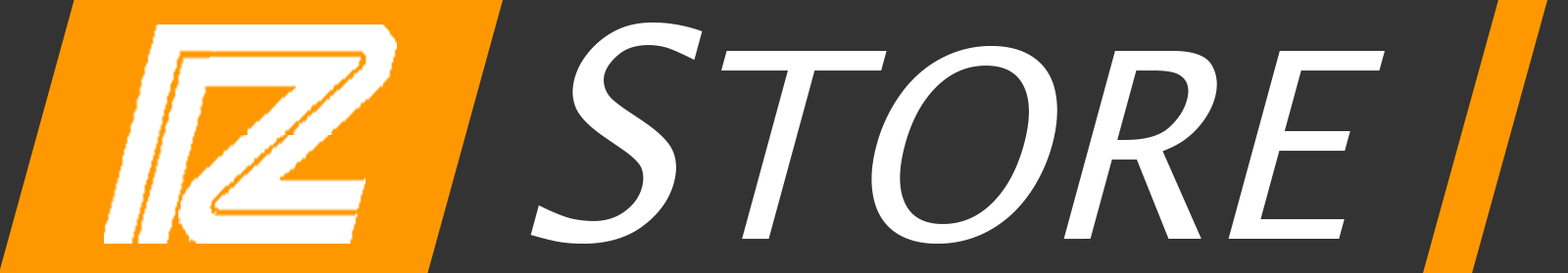
<style>
.page{position:relative;width:1568px;height:273px;background:#333333}
.page>*{position:absolute;margin:0}
.t1{font:269.2px "LucidaSans";color:#ffffff;scale:0.97 1}
.t2{font:303.8px "LucidaSans";color:#ffffff;scale:0.97 1}
</style>
<div class="page">
<p class="t1" style="left:530px;top:23px;width:855px;height:221px"><span class="t2">S</span>TORE</p>
</div>
